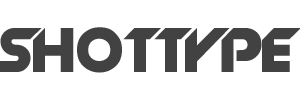
<style>
.page{position:relative;width:300px;height:100px;background:#ffffff}
.page>*{position:absolute;margin:0}
.t1{font:66.9px "Slant";letter-spacing:-0.005em;color:#424242;text-transform:uppercase}
</style>
<div class="page">
<p class="t1" style="left:0px;top:27px;width:301px;height:46px">Shottype</p>
</div>
